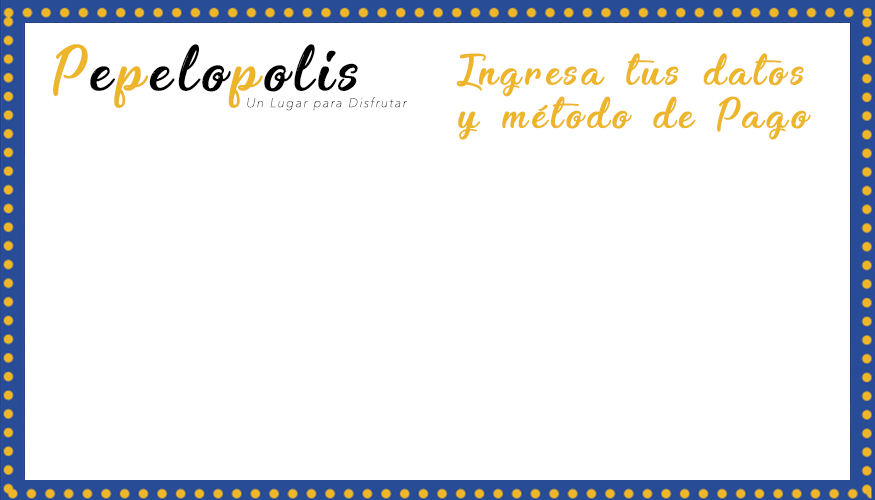
<style>
.page{position:relative;width:875px;height:500px;background:#ffffff}
.page>*{position:absolute;margin:0}
.t1{font:53.3px "Enchanting-Celebrations";letter-spacing:0.12em;color:#000000}
.t2{font:53.3px "Enchanting-Celebrations";letter-spacing:0.12em;color:#ecb52a}
.t3{font:36px "Enchanting-Celebrations";letter-spacing:0.12em;color:#ecb52a}
.t4{font:12.5px "AvenirNext-UltraLightItalic";letter-spacing:0.12em;color:#272727}
</style>
<div class="page">
<p class="t1" style="left:53px;top:44px;width:305px;height:64px"><span class="t2">P</span>e<span class="t2">p</span>elo<span class="t2">p</span>olis</p>
<p class="t3" style="left:456px;top:53px;width:355px;height:87px;text-align:center">Ingresa tus datos<br>y método de Pago</p>
<p class="t4" style="left:247px;top:97px;width:160px;height:14px">Un Lugar para Disfrutar</p>
</div>
